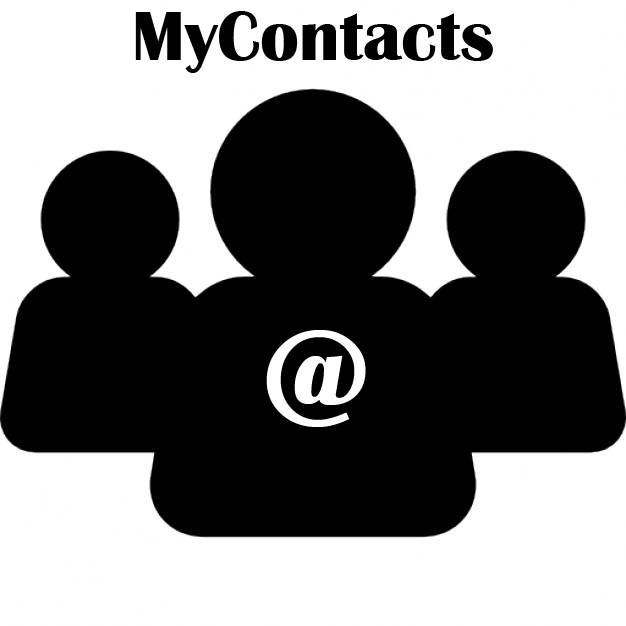
<style>
.page{position:relative;width:626px;height:626px;background:#ffffff}
.page>*{position:absolute;margin:0}
.t1{font:72px "BritannicBold";color:#010101}
.t2{font:140px "BritannicBold";color:#ffffff}
</style>
<div class="page">
<p class="t1" style="left:135px;top:11px;width:358px;height:62px">MyContacts</p>
<p class="t2" style="left:266px;top:330px;width:100px;height:97px">@</p>
</div>
